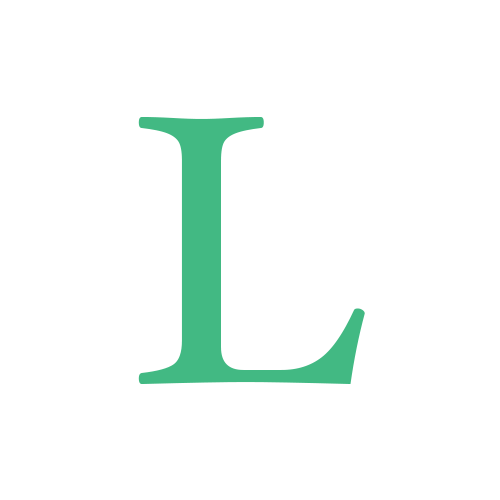
<style>
.page{position:relative;width:500px;height:500px;background:#ffffff}
.page>*{position:absolute;margin:0}
.t1{font:384.6px "HoeflerText-Regular";color:#42b983}
</style>
<div class="page">
<p class="t1" style="left:138px;top:117px;width:227px;height:267px">L</p>
</div>
